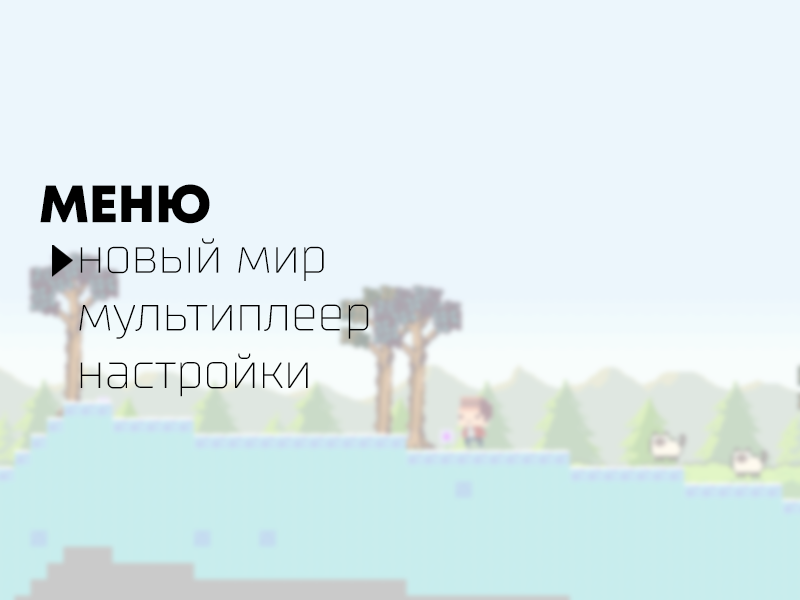
<style>
.page{position:relative;width:800px;height:600px;background:#ecf6fc}
.page>*{position:absolute;margin:0}
.t1{font:52.6px "Mont-HeavyDEMO";color:#000000;scale:0.97 1}
.t2{font:48px "Supermolot-Thin";color:#000000;scale:0.97 1}
</style>
<div class="page">
<p class="t1" style="left:40px;top:184px;width:170px;height:40px">МЕНЮ</p>
<p class="t2" style="left:79px;top:238px;width:290px;height:159px">новый мир<br>мультиплеер<br>настройки</p>
</div>
